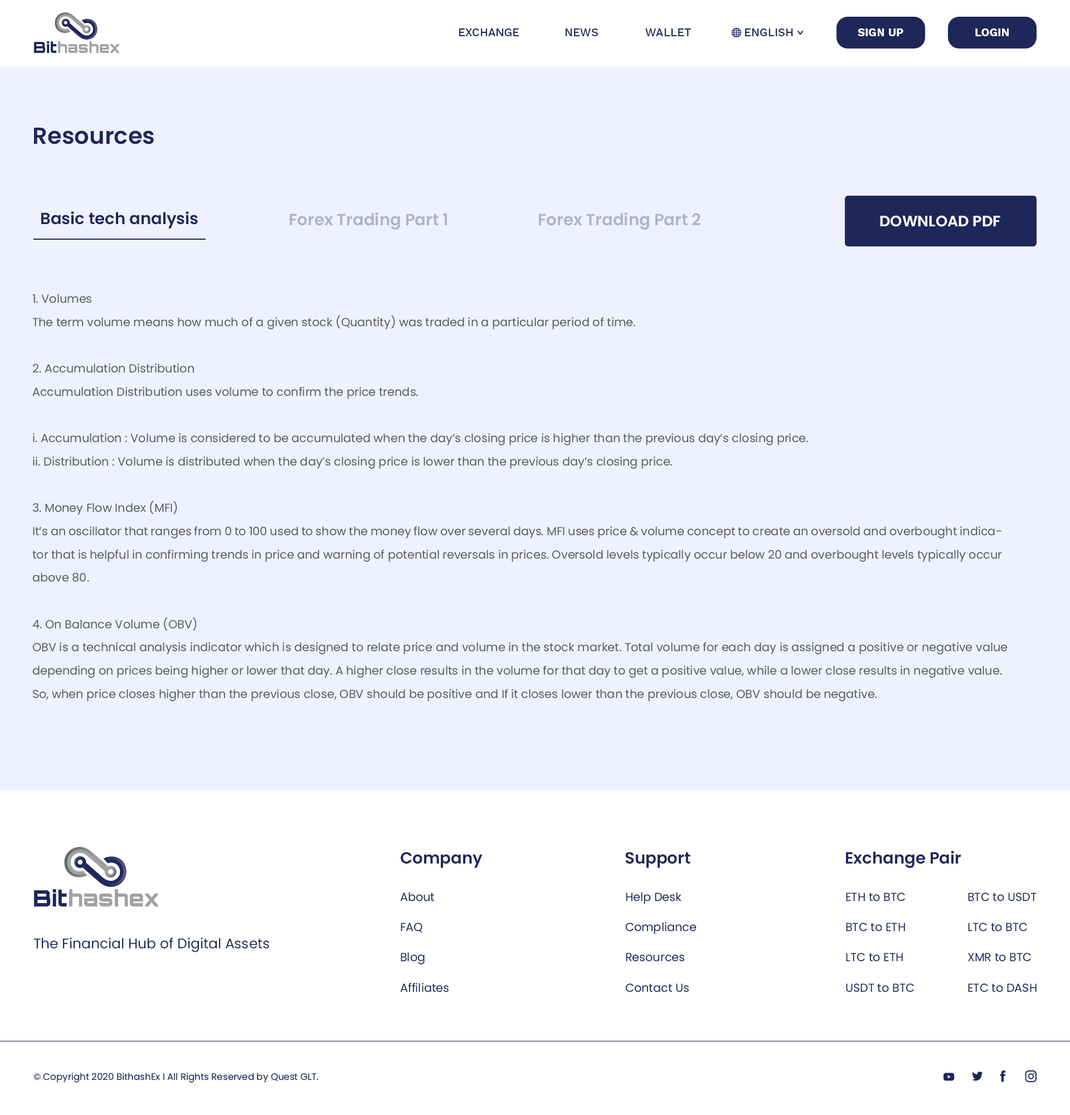
<style>
.page{position:relative;width:1070px;height:1115px;background:#eff1ff}
.page>*{position:absolute;margin:0}
.t1{font:11.4px "WorkSans-Medium";color:#1e2759;text-transform:uppercase}
.t2{font:11.3px "WorkSans-Bold";color:#ffffff;text-transform:uppercase}
.t3{font:23.2px "Poppins-SemiBold";color:#1e275a}
.t4{font:16.3px "Poppins-SemiBold";color:#1e275a}
.t5{font:16.3px "Poppins-SemiBold";color:#b0b3c8}
.t6{font:15.1px "Poppins-SemiBold";color:#ffffff;text-transform:uppercase}
.t7{font:11.6px/23.2px "Poppins-Regular";color:#5c5b67}
.t8{font:11.6px/30.2px "Poppins-Regular";color:#1e275a}
.t9{font:13.9px "Poppins-Regular";color:#1e275a}
.t10{font:9.3px "Poppins-Regular";color:#1e275a}
</style>
<div class="page">
<p class="t1" style="left:459px;top:28px;width:60px;height:8px">exchange</p>
<p class="t1" style="left:565px;top:28px;width:33px;height:8px">news</p>
<p class="t1" style="left:645px;top:28px;width:46px;height:8px">wallet</p>
<p class="t1" style="left:745px;top:28px;width:48px;height:8px">english</p>
<p class="t2" style="left:858px;top:28px;width:45px;height:8px">sign up</p>
<p class="t2" style="left:975px;top:28px;width:34px;height:8px">login</p>
<p class="t3" style="left:34px;top:128px;width:120px;height:16px">Resources</p>
<p class="t4" style="left:41px;top:211px;width:157px;height:17px">Basic tech analysis</p>
<p class="t5" style="left:290px;top:212px;width:157px;height:18px">Forex Trading Part 1</p>
<p class="t5" style="left:539px;top:212px;width:161px;height:18px">Forex Trading Part 2</p>
<p class="t6" style="left:880px;top:215px;width:120px;height:12px">download PDF</p>
<p class="t7" style="left:32px;top:294px;width:976px;height:407px;text-align:justify">1. Volumes<br>The term volume means how much of a given stock (Quantity) was traded in a particular period of time.<br><br>2. Accumulation Distribution<br>Accumulation Distribution uses volume to confirm the price trends.<br><br>i. Accumulation : Volume is considered to be accumulated when the day’s closing price is higher than the previous day’s closing price.<br>ii. Distribution : Volume is distributed when the day’s closing price is lower than the previous day’s closing price.<br><br>3. Money Flow Index (MFI)<br>It’s an oscillator that ranges from 0 to 100 used to show the money flow over several days. MFI uses price &amp; volume concept to create an oversold and overbought indicator that is helpful in confirming trends in price and warning of potential reversals in prices. Oversold levels typically occur below 20 and overbought levels typically occur above 80.<br><br>4. On Balance Volume (OBV)<br>OBV is a technical analysis indicator which is designed to relate price and volume in the stock market. Total volume for each day is assigned a positive or negative value<br>depending on prices being higher or lower that day. A higher close results in the volume for that day to get a positive value, while a lower close results in negative value. So, when price closes higher than the previous close, OBV should be positive and If it closes lower than the previous close, OBV should be negative.</p>
<p class="t4" style="left:401px;top:851px;width:82px;height:17px">Company</p>
<p class="t4" style="left:625px;top:851px;width:65px;height:17px">Support</p>
<p class="t4" style="left:846px;top:850px;width:115px;height:18px">Exchange Pair</p>
<p class="t8" style="left:400px;top:892px;width:49px;height:100px">About<br>FAQ<br>Blog<br>Affiliates</p>
<p class="t8" style="left:625px;top:892px;width:72px;height:100px">Help Desk<br>Compliance<br>Resources<br>Contact Us</p>
<p class="t8" style="left:846px;top:892px;width:68px;height:100px">ETH to BTC<br>BTC to ETH<br>LTC to ETH<br>USDT to BTC</p>
<p class="t8" style="left:968px;top:892px;width:68px;height:100px">BTC to USDT<br>LTC to BTC<br>XMR to BTC<br>ETC to DASH</p>
<p class="t9" style="left:33px;top:937px;width:236px;height:15px">The Financial Hub of Digital Assets</p>
<p class="t10" style="left:33px;top:1072px;width:285px;height:10px">© Copyright 2020 BithashEx I All Rights Reserved by Quest GLT.</p>
</div>
